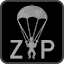
<style>
.page{position:relative;width:64px;height:64px;background:#000000}
.page>*{position:absolute;margin:0}
.t1{font:26px "AlteDIN1451Mittelschrift";color:#a7a7a7}
</style>
<div class="page">
<p class="t1" style="left:10px;top:40px;width:13px;height:19px">Z</p>
<p class="t1" style="left:41px;top:40px;width:14px;height:19px">P</p>
</div>
